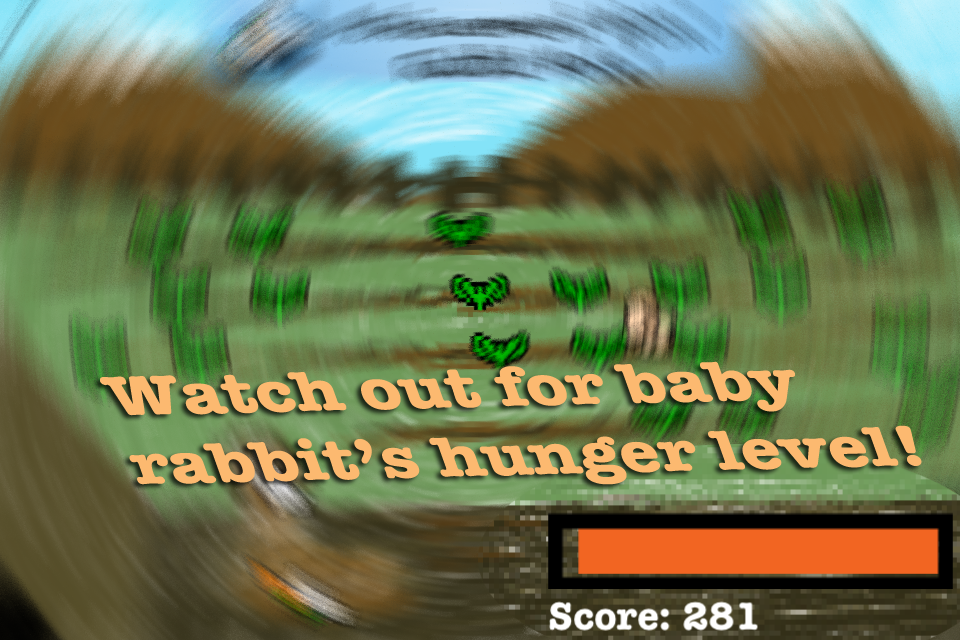
<style>
.page{position:relative;width:960px;height:640px}
.page>*{position:absolute;margin:0}
.t1{font:60.6px "AmericanTypewriter-Bold";color:#fcb970;scale:1.2 1}
</style>
<div class="page">
<p class="t1" style="left:100px;top:361px;width:822px;height:124px;rotate:-1deg">Watch out for baby<br>rabbit’s hunger level!</p>
</div>
